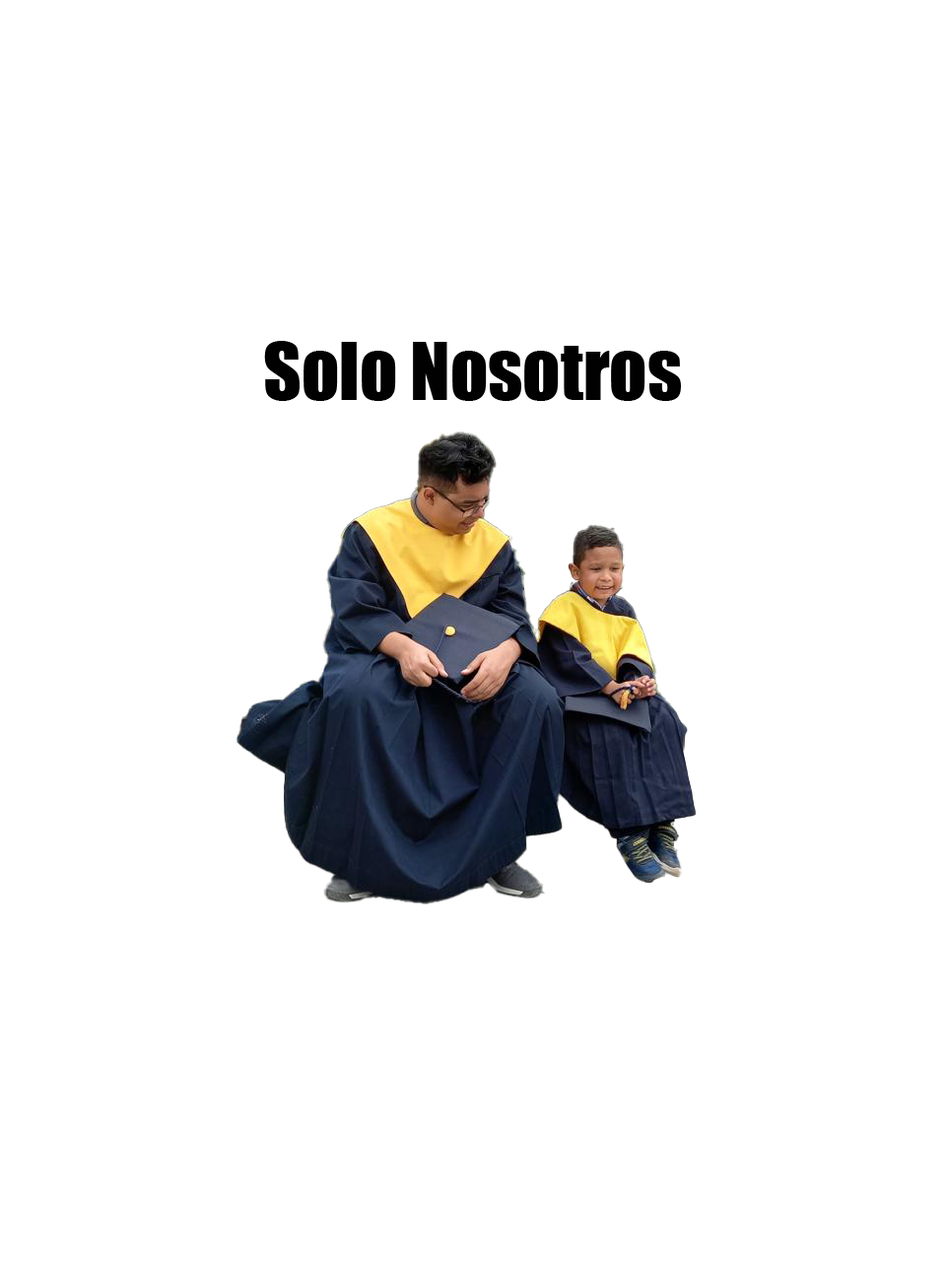
<style>
.page{position:relative;width:946px;height:1261px;background:#ffffff}
.page>*{position:absolute;margin:0}
.t1{font:73.9px "Impact";color:#010101}
</style>
<div class="page">
<p class="t1" style="left:264px;top:341px;width:417px;height:60px">Solo Nosotros</p>
</div>
